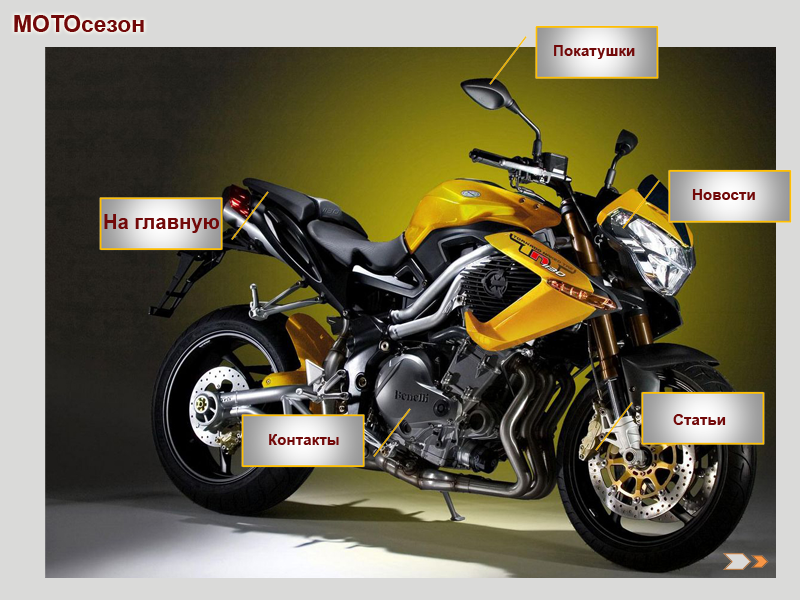
<style>
.page{position:relative;width:800px;height:600px}
.page>*{position:absolute;margin:0}
.t1{font:22.9px "Arial-BoldMT";color:#720909}
.t2{font:15.2px "Arial-BoldMT";color:#720909}
.t3{font:20.3px "Arial-BoldMT";color:#720909}
</style>
<div class="page">
<p class="t1" style="left:14px;top:15px;width:130px;height:17px">МОТОсезон</p>
<p class="t2" style="left:554px;top:45px;width:81px;height:14px">Покатушки</p>
<p class="t2" style="left:692px;top:189px;width:63px;height:11px">Новости</p>
<p class="t3" style="left:104px;top:214px;width:115px;height:19px">На главную</p>
<p class="t2" style="left:673px;top:414px;width:53px;height:11px">Статьи</p>
<p class="t2" style="left:269px;top:434px;width:70px;height:11px">Контакты</p>
</div>
